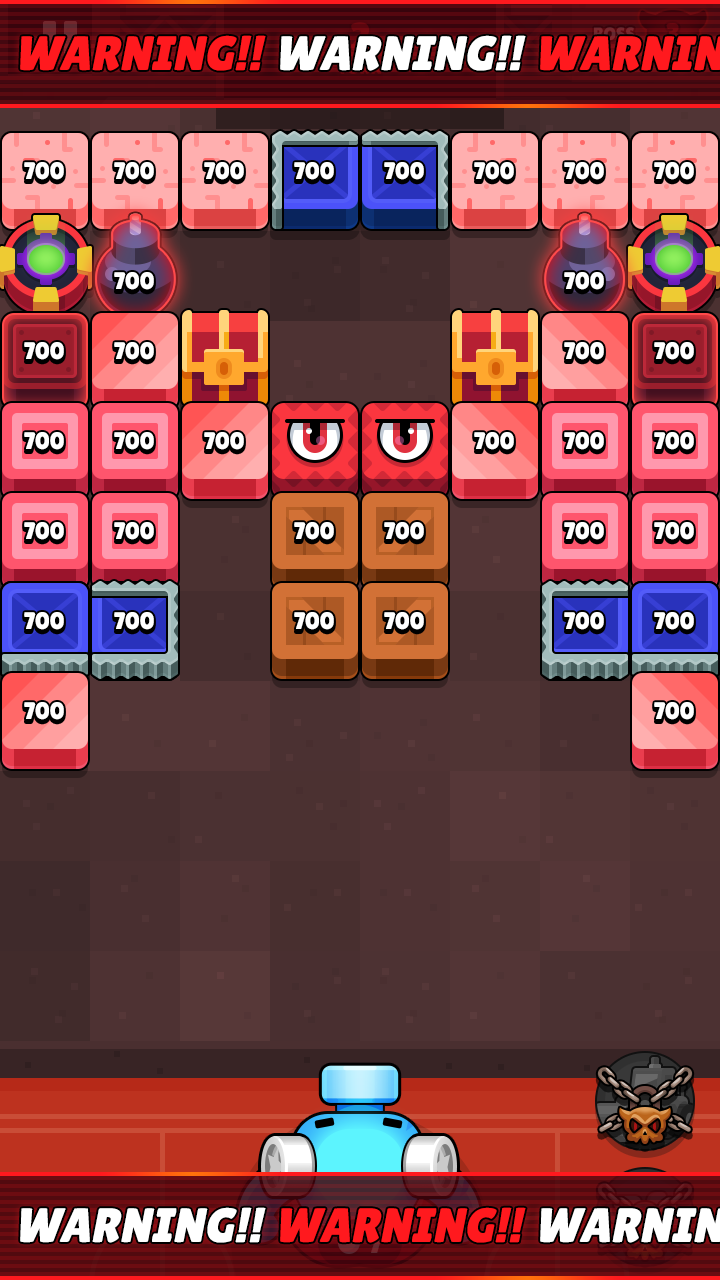
<style>
.page{position:relative;width:720px;height:1280px}
.page>*{position:absolute;margin:0}
.t1{font:18px "LilitaOne";text-transform:uppercase}
.t2{font:48px "LilitaOne";color:#ff191e;text-transform:uppercase;font-style:italic}
.t3{font:48px "LilitaOne";color:#ffffff;text-transform:uppercase;font-style:italic}
.t4{font:24px "LilitaOne";color:#ffffff}
.t5{font:28px "LilitaOne"}
</style>
<div class="page">
<p class="t1" style="left:594px;top:27px;width:41px;height:14px">boss</p>
<p class="t2" style="left:20px;top:35px;width:246px;height:36px">warning!!</p>
<p class="t3" style="left:280px;top:35px;width:246px;height:36px">warning!!</p>
<p class="t4" style="left:24px;top:162px;width:40px;height:18px">700</p>
<p class="t4" style="left:114px;top:162px;width:40px;height:18px">700</p>
<p class="t4" style="left:204px;top:162px;width:40px;height:18px">700</p>
<p class="t4" style="left:294px;top:162px;width:40px;height:18px">700</p>
<p class="t4" style="left:384px;top:162px;width:40px;height:18px">700</p>
<p class="t4" style="left:474px;top:162px;width:40px;height:18px">700</p>
<p class="t4" style="left:564px;top:162px;width:40px;height:18px">700</p>
<p class="t4" style="left:654px;top:162px;width:40px;height:18px">700</p>
<p class="t4" style="left:114px;top:272px;width:40px;height:18px">700</p>
<p class="t4" style="left:564px;top:272px;width:40px;height:18px">700</p>
<p class="t4" style="left:24px;top:342px;width:40px;height:18px">700</p>
<p class="t4" style="left:114px;top:342px;width:40px;height:18px">700</p>
<p class="t4" style="left:564px;top:342px;width:40px;height:18px">700</p>
<p class="t4" style="left:654px;top:342px;width:40px;height:18px">700</p>
<p class="t4" style="left:24px;top:432px;width:40px;height:18px">700</p>
<p class="t4" style="left:114px;top:432px;width:40px;height:18px">700</p>
<p class="t4" style="left:204px;top:432px;width:40px;height:18px">700</p>
<p class="t4" style="left:474px;top:432px;width:40px;height:18px">700</p>
<p class="t4" style="left:564px;top:432px;width:40px;height:18px">700</p>
<p class="t4" style="left:654px;top:432px;width:40px;height:18px">700</p>
<p class="t4" style="left:24px;top:522px;width:40px;height:18px">700</p>
<p class="t4" style="left:114px;top:522px;width:40px;height:18px">700</p>
<p class="t4" style="left:294px;top:522px;width:40px;height:18px">700</p>
<p class="t4" style="left:384px;top:522px;width:40px;height:18px">700</p>
<p class="t4" style="left:564px;top:522px;width:40px;height:18px">700</p>
<p class="t4" style="left:654px;top:522px;width:40px;height:18px">700</p>
<p class="t4" style="left:24px;top:612px;width:40px;height:18px">700</p>
<p class="t4" style="left:114px;top:612px;width:40px;height:18px">700</p>
<p class="t4" style="left:294px;top:612px;width:40px;height:18px">700</p>
<p class="t4" style="left:384px;top:612px;width:40px;height:18px">700</p>
<p class="t4" style="left:564px;top:612px;width:40px;height:18px">700</p>
<p class="t4" style="left:654px;top:612px;width:40px;height:18px">700</p>
<p class="t4" style="left:24px;top:702px;width:40px;height:18px">700</p>
<p class="t4" style="left:654px;top:702px;width:40px;height:18px">700</p>
<p class="t3" style="left:20px;top:1207px;width:246px;height:36px">warning!!</p>
<p class="t2" style="left:280px;top:1207px;width:246px;height:36px">warning!!</p>
<p class="t5" style="left:369px;top:1233px;width:13px;height:20px">7</p>
</div>
